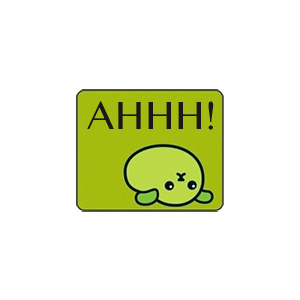
<style>
.page{position:relative;width:300px;height:300px;background:#ffffff}
.page>*{position:absolute;margin:0}
.t1{font:39.7px "MyanmarMN";letter-spacing:0.016em;color:#181818}
</style>
<div class="page">
<p class="t1" style="left:87px;top:101px;width:127px;height:29px">AHHH!</p>
</div>
